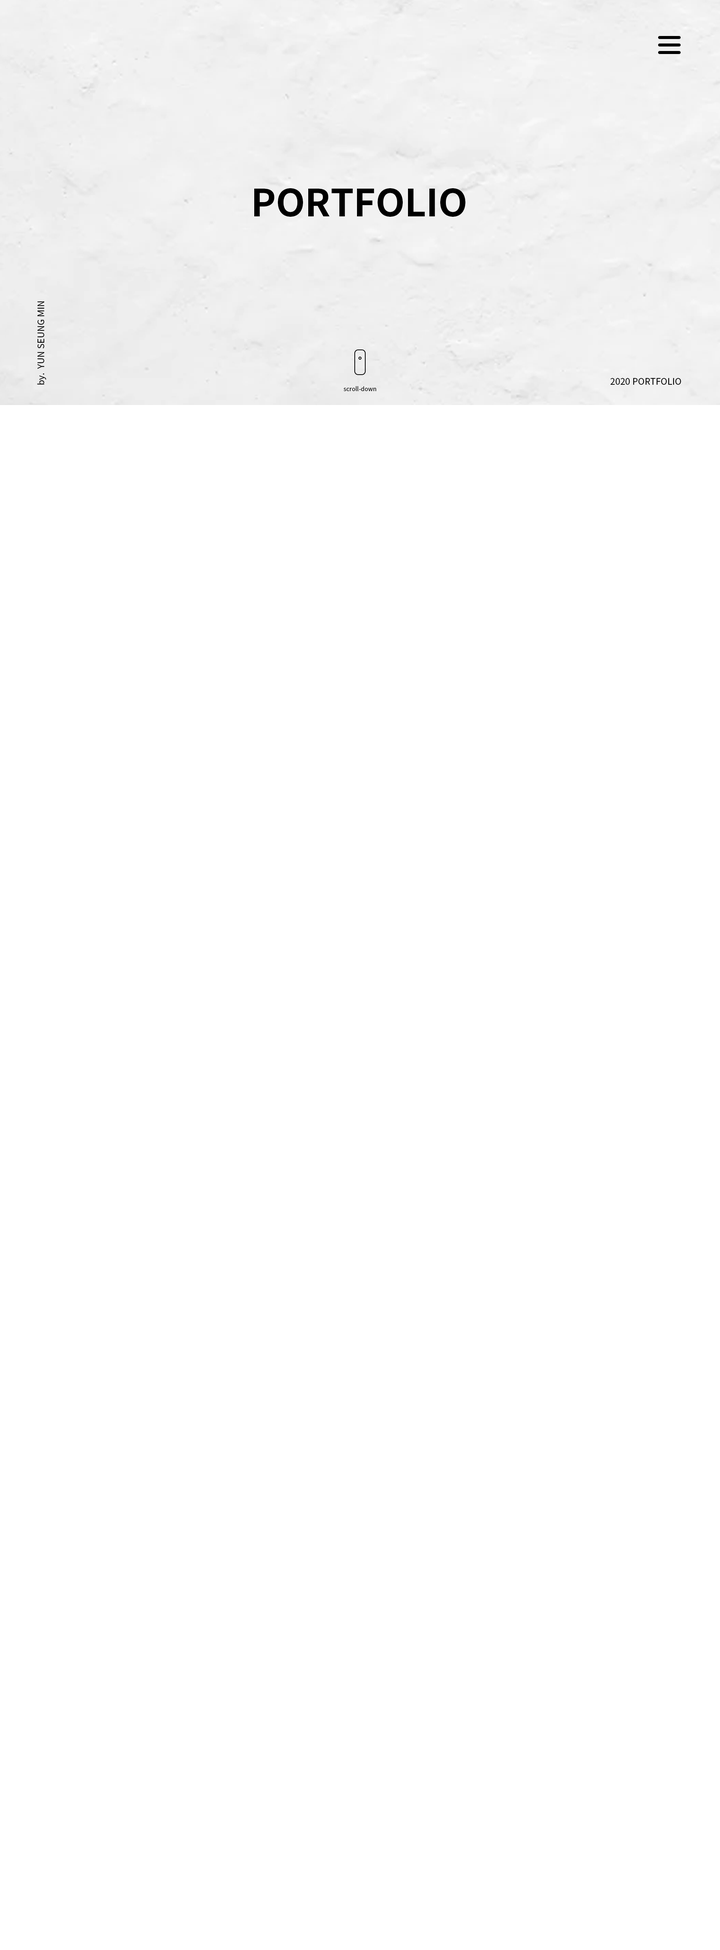
<style>
.page{position:relative;width:720px;height:1950px;background:#ffffff}
.page>*{position:absolute;margin:0}
.t1{font:37.5px "NotoSansKR-Bold";color:#000000}
.t2{font:9px "NotoSansKR-Regular";color:#000000}
.t3{font:6px "NotoSansKR-Regular";letter-spacing:-0.001em;color:#000000}
</style>
<div class="page">
<p class="t1" style="left:254px;top:188px;width:211px;height:29px">PORTFOLIO</p>
<p class="t2" style="left:37px;top:301px;width:9px;height:84px;rotate:-90deg">by.  YUN SEUNG MIN</p>
<p class="t3" style="left:344px;top:386px;width:32px;height:5px">scroll-down</p>
<p class="t2" style="left:610px;top:378px;width:71px;height:7px">2020 PORTFOLIO</p>
</div>
